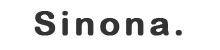
<style>
.page{position:relative;width:220px;height:50px;background:#ffffff}
.page>*{position:absolute;margin:0}
.t1{font:33.3px "ArialRoundedMTBold";letter-spacing:0.1em;color:#333333;font-weight:bold}
</style>
<div class="page">
<p class="t1" style="left:34px;top:11px;width:148px;height:25px">Sinona.</p>
</div>
